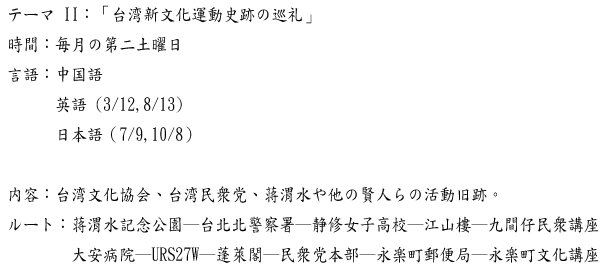
<style>
.page{position:relative;width:600px;height:272px;background:#ffffff}
.page>*{position:absolute;margin:0}
.t1{font:18px/30px "DFKaiShu-SB-Estd-BF";color:#060606;scale:0.89 1}
</style>
<div class="page">
<p class="t1" style="left:8px;top:5px;width:591px;height:258px">テーマ II：「台湾新文化運動史跡の巡礼」<br>時間：毎月の第二土曜日<br>言語：中国語<br>      英語 (3/12,8/13)<br>      日本語（7/9,10/8）<br><br>内容：台湾文化協会、台湾民衆党、蒋渭水や他の賢人らの活動旧跡。<br>ルート：蒋渭水記念公園─台北北警察署─静修女子高校─江山樓─九間仔民衆講座<br>        大安病院─URS27W─蓬萊閣─民衆党本部─永楽町郵便局─永楽町文化講座</p>
</div>
